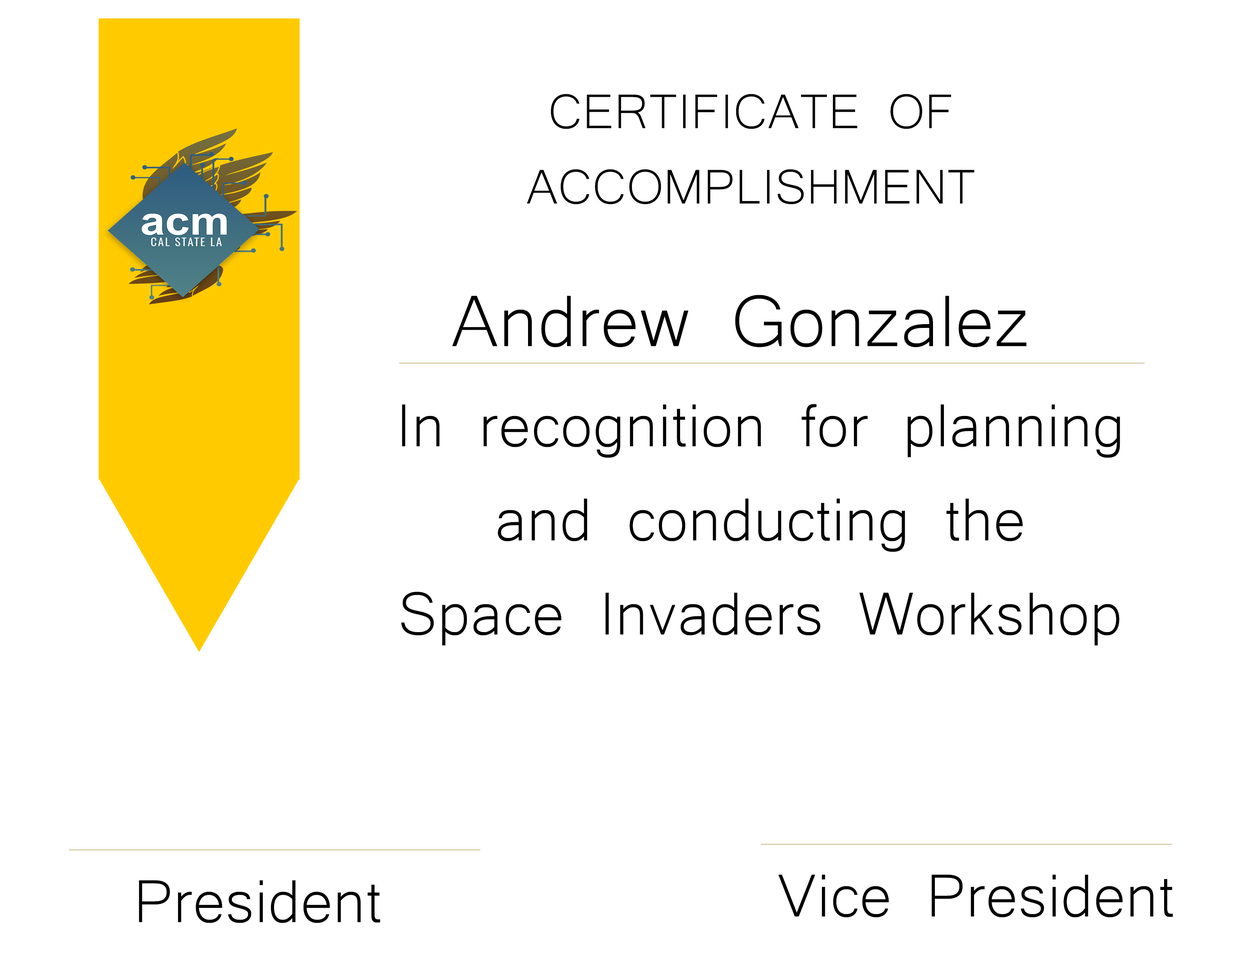
<style>
.page{position:relative;width:1242px;height:960px;background:#ffffff}
.page>*{position:absolute;margin:0}
.t1{font:62.7px "Microsoft-Yi-Baiti";color:#000000}
.t2{font:94.1px "Microsoft-Yi-Baiti";color:#000000}
.t3{font:78.4px "Microsoft-Yi-Baiti";color:#000000}
</style>
<div class="page">
<p class="t1" style="left:527px;top:94px;width:448px;height:110px;text-align:center">CERTIFICATE OF<br>ACCOMPLISHMENT</p>
<p class="t2" style="left:452px;top:295px;width:575px;height:52px">Andrew Gonzalez</p>
<p class="t3" style="left:401px;top:404px;width:719px;height:242px;text-align:center">In recognition for planning<br>and conducting the<br>Space Invaders Workshop</p>
<p class="t3" style="left:139px;top:880px;width:241px;height:43px">President</p>
<p class="t3" style="left:778px;top:874px;width:395px;height:43px">Vice President</p>
</div>
